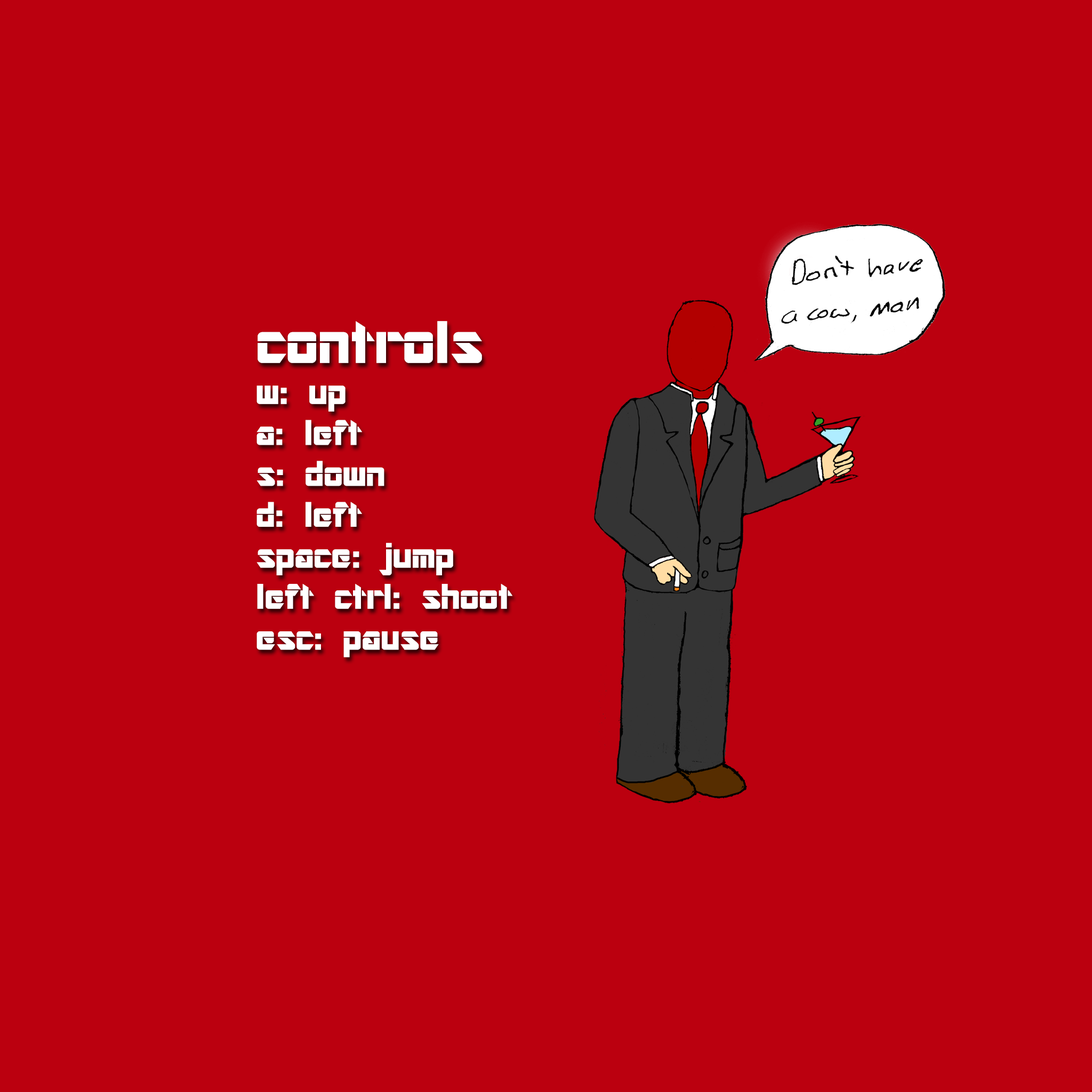
<style>
.page{position:relative;width:1092px;height:1092px;background:#bb000f}
.page>*{position:absolute;margin:0}
.t1{font:34.1px "ARDESTINE";color:#ffffff;scale:1.04 1}
.t2{font:57.6px "ARDESTINE";color:#ffffff;scale:1.04 1}
</style>
<div class="page">
<p class="t1" style="left:256px;top:321px;width:256px;height:336px"><span class="t2">controls<br></span>w: up<br>a: left<br>s: down<br>d: left<br>space: jump<br>left ctrl: shoot<br>esc: pause</p>
</div>
